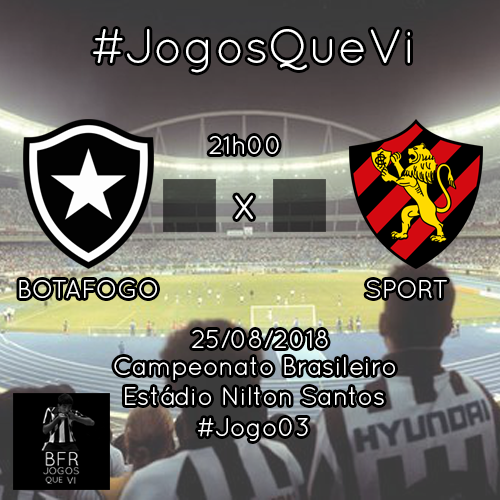
<style>
.page{position:relative;width:500px;height:500px}
.page>*{position:absolute;margin:0}
.t1{font:48px "QuicksandBook-Regular";color:#ffffff}
.t2{font:25px "QuicksandBook-Regular";color:#ffffff}
</style>
<div class="page">
<p class="t1" style="left:93px;top:29px;width:317px;height:44px">#JogosQueVi</p>
<p class="t2" style="left:209px;top:136px;width:70px;height:18px">21h00</p>
<p class="t1" style="left:235px;top:195px;width:18px;height:24px">x</p>
<p class="t2" style="left:19px;top:280px;width:138px;height:18px">BOTAFOGO</p>
<p class="t2" style="left:366px;top:280px;width:81px;height:18px">SPORT</p>
<p class="t2" style="left:192px;top:330px;width:136px;height:18px">25/08/2018</p>
<p class="t2" style="left:114px;top:357px;width:281px;height:23px">Campeonato Brasileiro</p>
<p class="t2" style="left:125px;top:387px;width:259px;height:18px">Estádio Nilton Santos</p>
<p class="t2" style="left:198px;top:418px;width:110px;height:23px">#Jogo03</p>
</div>
